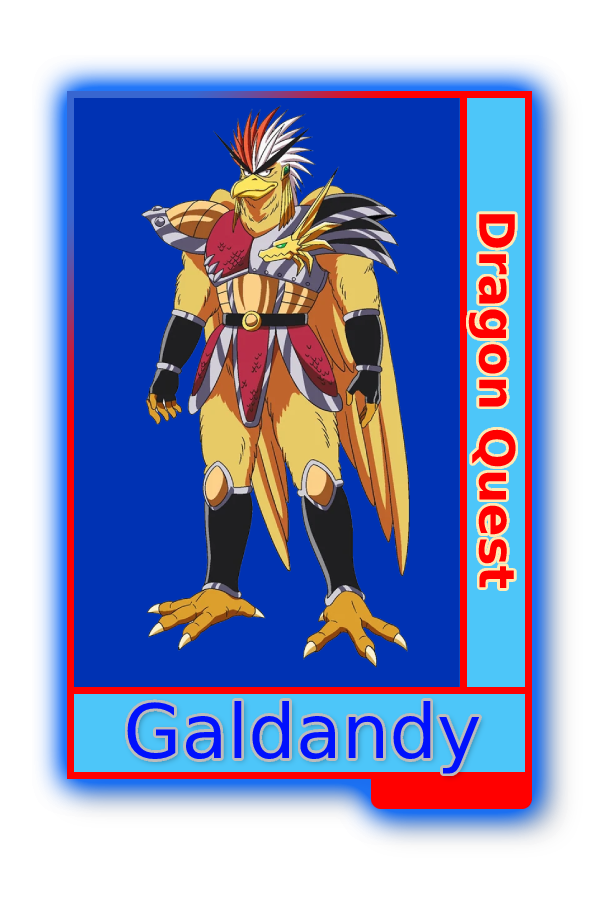
<style>
.page{position:relative;width:600px;height:900px;background:#0032b3}
.page>*{position:absolute;margin:0}
.t1{font:48.8px "MADETOMMY-Bold";color:#ff0000}
.t2{font:75px "CoolveticaRg-Regular";color:#0011fd}
</style>
<div class="page">
<p class="t1" style="left:468px;top:214px;width:48px;height:374px;rotate:90deg">Dragon Quest</p>
<p class="t2" style="left:127px;top:701px;width:353px;height:73px">Galdandy</p>
</div>
